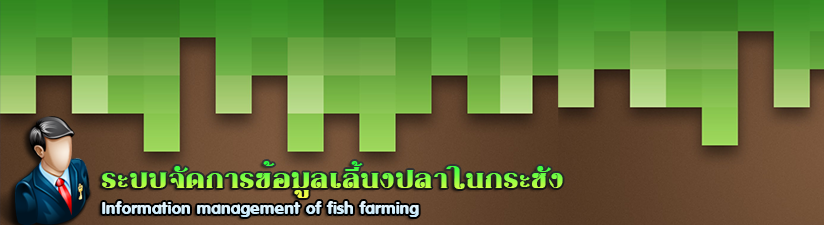
<style>
.page{position:relative;width:824px;height:225px}
.page>*{position:absolute;margin:0}
.t1{font:37.4px "DSEOrchid"}
.t2{font:15.9px "DSP_SuKumWit";color:#d9f0fc}
</style>
<div class="page">
<p class="t1" style="left:102px;top:161px;width:461px;height:37px">ระบบจัดการข้อมูลเลี้นงปลาในกระชัง</p>
<p class="t2" style="left:102px;top:201px;width:317px;height:16px">Information management of fish farming</p>
</div>
